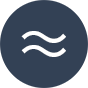
<style>
.page{position:relative;width:88px;height:88px;background:#334155}
.page>*{position:absolute;margin:0}
.t1{font:61.6px "HiraginoSansGB-W3";color:#ffffff}
</style>
<div class="page">
<p class="t1" style="left:21px;top:31px;width:45px;height:26px">≈</p>
</div>
